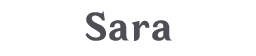
<style>
.page{position:relative;width:256px;height:56px;background:#ffffff}
.page>*{position:absolute;margin:0}
.t1{font:36px "HYWenHei-HEW";color:#4f4e57}
</style>
<div class="page">
<p class="t1" style="left:85px;top:11px;width:87px;height:30px">Sara</p>
</div>
